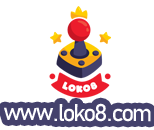
<style>
.page{position:relative;width:154px;height:130px;background:#ffffff}
.page>*{position:absolute;margin:0}
.t1{font:24px "Bahnschrift";letter-spacing:-0.1em;color:#ffffff}
</style>
<div class="page">
<p class="t1" style="left:4px;top:103px;width:147px;height:19px">www . loko8 . com</p>
</div>
